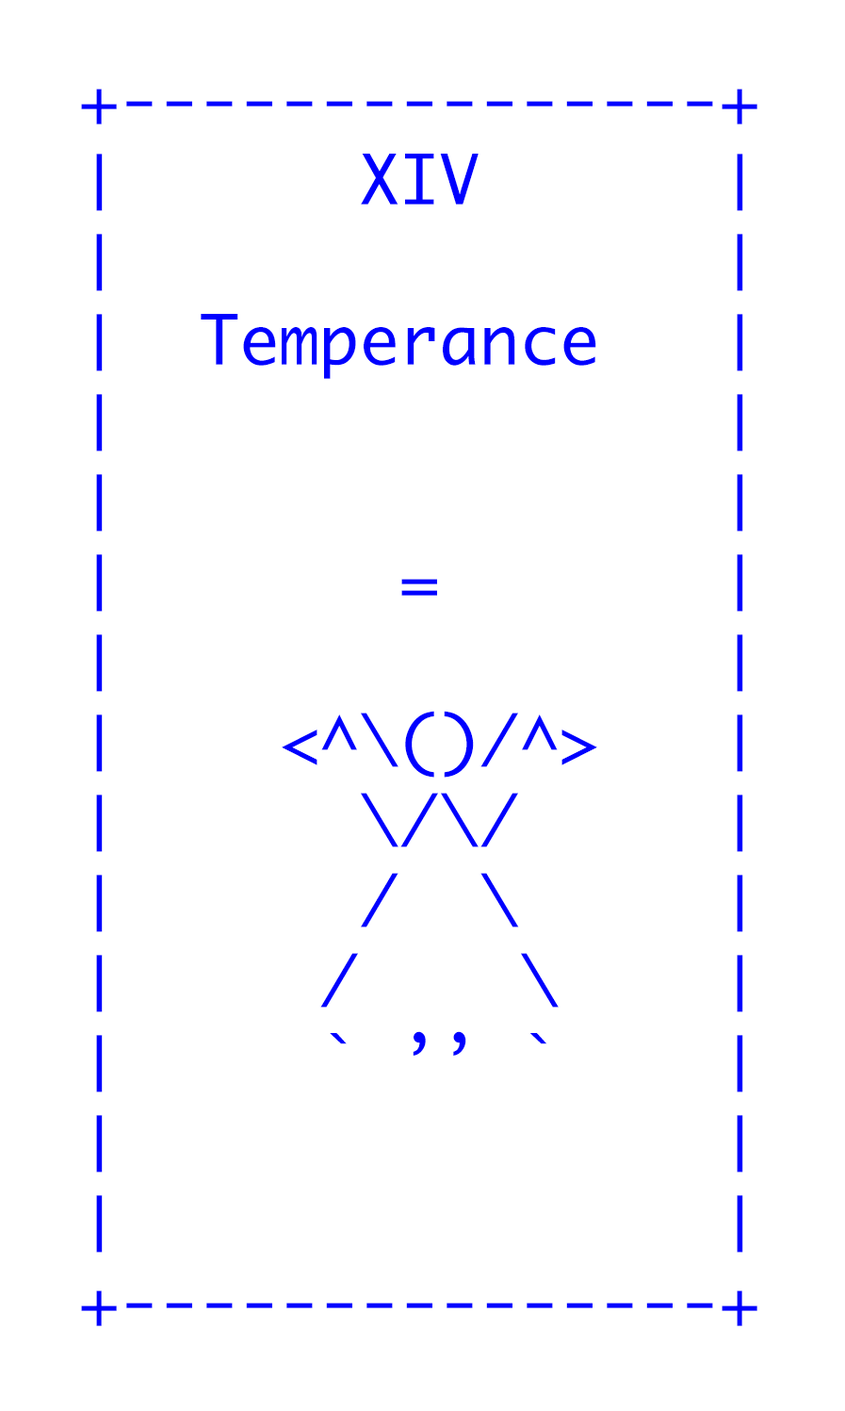
<style>
.page{position:relative;width:845px;height:1411px;background:#ffffff}
.page>*{position:absolute;margin:0}
.t1{font:66.7px "Monaco";color:#0000ff}
</style>
<div class="page">
<p class="t1" style="left:81px;top:89px;width:677px;height:1237px">+---------------+<br>│      XIV      │<br>│               │<br>│  Temperance   │<br>│               │<br>│               │<br>│       =       │<br>│               │ <br>│    &lt;^\()/^&gt;   │ <br>│      \/\/     │<br>│      /  \     │ <br>│     /    \    │ <br>│     ` ’’ `    │<br>│               │<br>│               │<br>+---------------+</p>
</div>
